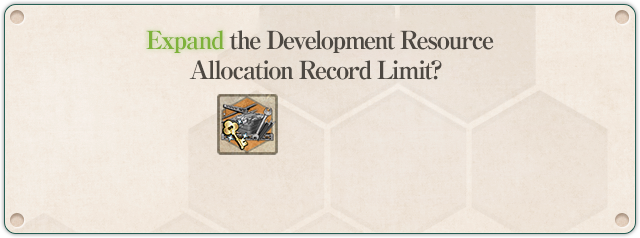
<style>
.page{position:relative;width:640px;height:238px}
.page>*{position:absolute;margin:0}
.t1{font:25px "RyuminPro-ExBold";letter-spacing:-0.08em;color:#4d4842}
.t2{font:25px "RyuminPro-ExBold";letter-spacing:-0.08em;color:#7eb23a}
</style>
<div class="page">
<p class="t1" style="left:146px;top:30px;width:348px;height:50px;text-align:center"><span class="t2">Expand</span> the Development Resource<br>Allocation Record Limit?</p>
<p class="t2" style="left:146px;top:30px;width:78px;height:23px">Expand</p>
</div>
